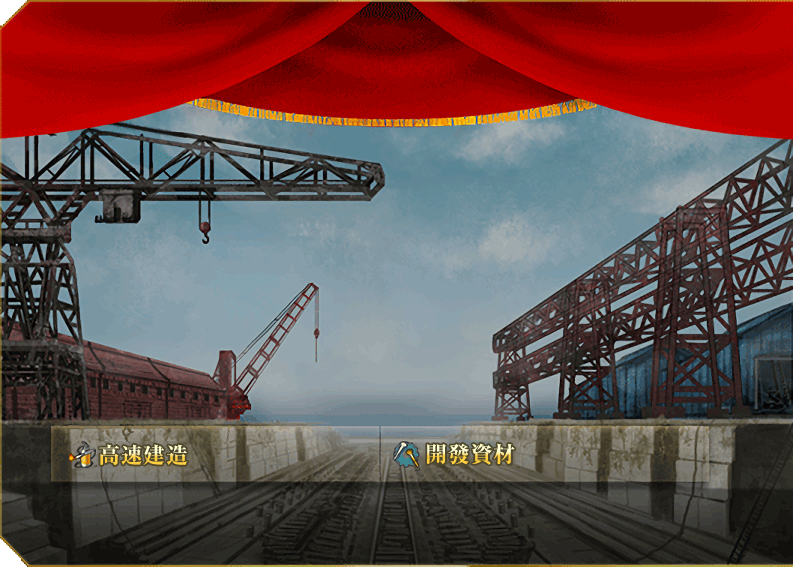
<style>
.page{position:relative;width:793px;height:567px}
.page>*{position:absolute;margin:0}
.t1{font:22px "RyuminPro-ExBold";letter-spacing:0.045em}
</style>
<div class="page">
<p class="t1" style="left:99px;top:444px;width:89px;height:21px">高速建造</p>
<p class="t1" style="left:427px;top:443px;width:88px;height:22px">開發資材</p>
</div>
